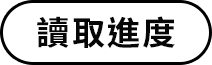
<style>
.page{position:relative;width:212px;height:65px;background:#ffffff}
.page>*{position:absolute;margin:0}
.t1{font:33.3px "NotoSansCJKtc-Bold";letter-spacing:0.06em;color:#060606}
</style>
<div class="page">
<p class="t1" style="left:37px;top:16px;width:138px;height:33px">讀取進度</p>
</div>
